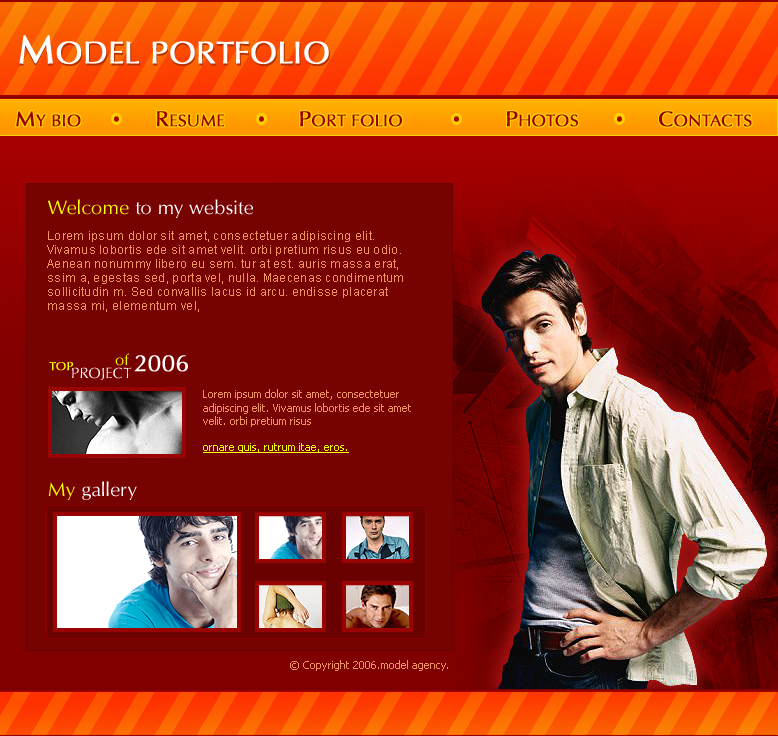
<style>
.page{position:relative;width:778px;height:736px;background:#760202}
.page>*{position:absolute;margin:0}
.t1{font:31.9px "Harrow";font-weight:bold}
.t2{font:41px "Harrow";font-weight:bold}
.t3{font:31.9px "Harrow";color:#ffffff;font-weight:bold}
.t4{font:41px "Harrow";color:#ffffff;font-weight:bold}
.t5{font:17px "Harrow";color:#9a0000;font-weight:bold}
.t6{font:22px "Harrow";color:#9a0000;font-weight:bold}
.t7{font:20px "Harrow";color:#ffffff}
.t8{font:20px "Harrow";color:#feff00}
.t9{font:12px/14px "ArialMT";letter-spacing:0.025em;color:#f09361}
.t10{font:11px "Tahoma";color:#feff00;text-decoration:underline}
.t11{font:27.5px "Harrow";color:#feff00}
.t12{font:12px "Harrow";color:#feff00;font-weight:bold}
.t13{font:24px "Harrow";color:#ffffff;font-weight:bold}
.t14{font:15px "Harrow";color:#ffffff;text-transform:uppercase}
.t15{font:11px "Tahoma";color:#f09361}
</style>
<div class="page">
<p class="t1" style="left:19px;top:37px;width:311px;height:29px"><span class="t2">M</span>ODEL PORTFOLIO</p>
<p class="t3" style="left:19px;top:35px;width:310px;height:29px"><span class="t4">M</span>ODEL PORTFOLIO</p>
<p class="t5" style="left:16px;top:111px;width:736px;height:16px"><span class="t6">M</span>Y BIO              <span class="t6">R</span>ESUME              <span class="t6">P</span>ORT FOLIO<span class="t6">               P</span>HOTOS               <span class="t6">C</span>ONTACTS</p>
<p class="t7" style="left:47px;top:199px;width:206px;height:19px"><span class="t8">Welcome</span> to my website</p>
<p class="t9" style="left:47px;top:231px;width:356px;height:81px">Lorem ipsum dolor sit amet, consectetuer adipiscing elit. Vivamus lobortis ede sit amet velit. orbi pretium risus eu odio. Aenean nonummy libero eu sem. tur at est. auris massa erat, ssim a, egestas sed, porta vel, nulla. Maecenas condimentum sollicitudin m. Sed convallis lacus id arcu. endisse placerat        massa mi, elementum vel,<br><br><span class="t10">ornare quis, rutrum itae, eros. Sed quis augue.</span></p>
<p class="t11" style="left:115px;top:353px;width:14px;height:13px">of</p>
<p class="t12" style="left:49px;top:362px;width:24px;height:9px">TOP</p>
<p class="t13" style="left:134px;top:355px;width:54px;height:17px">2006</p>
<p class="t14" style="left:72px;top:367px;width:60px;height:13px">project</p>
<p class="t15" style="left:203px;top:389px;width:208px;height:64px">Lorem ipsum dolor sit amet, consectetuer adipiscing elit. Vivamus lobortis ede sit amet velit. orbi pretium risus<br><br><span class="t10">ornare quis, rutrum itae, eros.</span></p>
<p class="t7" style="left:48px;top:481px;width:89px;height:19px"><span class="t8">My</span> gallery</p>
<p class="t15" style="left:290px;top:660px;width:158px;height:11px">© Copyright 2006.model agency.</p>
</div>
